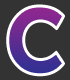
<style>
.page{position:relative;width:70px;height:80px;background:#333333}
.page>*{position:absolute;margin:0}
.t1{font:100px "BerlinSansFBDemi-Bold";letter-spacing:0.2em}
</style>
<div class="page">
<p class="t1" style="left:6px;top:4px;width:59px;height:73px">C</p>
</div>
